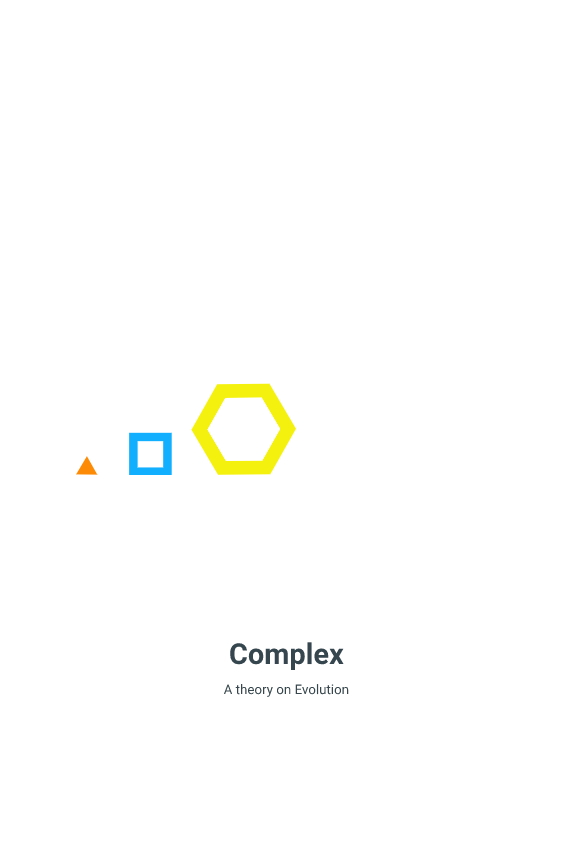
<style>
.page{position:relative;width:576px;height:864px;background:#ffffff}
.page>*{position:absolute;margin:0}
.t1{font:29px "Roboto-Bold";color:#36464e}
.t2{font:13.3px "Roboto-Regular";color:#37474d}
</style>
<div class="page">
<p class="t1" style="left:230px;top:642px;width:114px;height:28px">Complex</p>
<p class="t2" style="left:223px;top:684px;width:126px;height:13px">A theory on Evolution</p>
</div>
